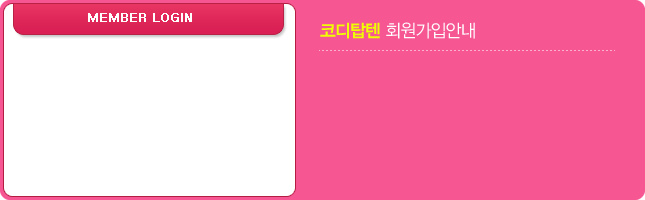
<style>
.page{position:relative;width:645px;height:200px;background:#f65692}
.page>*{position:absolute;margin:0}
.t1{font:12px "Dotum";color:#ffffff;font-weight:bold}
.t2{font:18px "YDIYGO320";letter-spacing:-0.05em;color:#ffffff;scale:0.96 1}
.t3{font:18px "YDIYGO340";letter-spacing:-0.05em;color:#f0ff00;scale:0.96 1}
</style>
<div class="page">
<p class="t1" style="left:88px;top:13px;width:104px;height:9px">MEMBER LOGIN</p>
<p class="t2" style="left:320px;top:22px;width:155px;height:17px"><span class="t3">코디탑텐 </span>회원가입안내</p>
</div>
